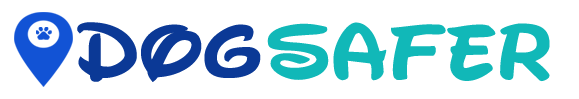
<style>
.page{position:relative;width:579px;height:99px;background:#ffffff}
.page>*{position:absolute;margin:0}
.t1{font:74.9px "WaltographUI-Bold";color:#0b3996;scale:1.15 1}
.t2{font:78.5px "WaltographUI-Bold";color:#11b8b8;scale:1.12 1}
</style>
<div class="page">
<p class="t1" style="left:77px;top:22px;width:184px;height:60px">Dog</p>
<p class="t2" style="left:267px;top:22px;width:283px;height:60px">Safer</p>
</div>
